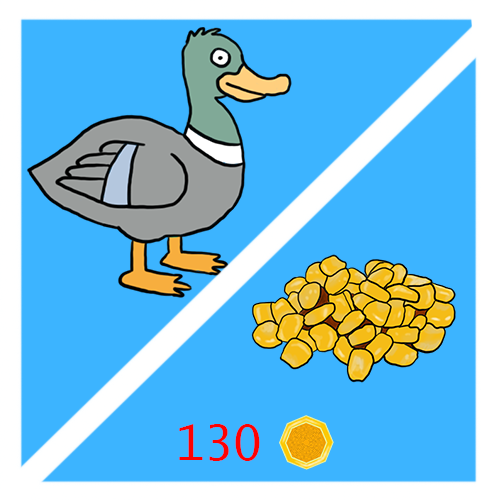
<style>
.page{position:relative;width:500px;height:500px;background:#3cb4ff}
.page>*{position:absolute;margin:0}
.t1{font:48px "LucidaConsole";color:#ff0101}
</style>
<div class="page">
<p class="t1" style="left:179px;top:424px;width:81px;height:37px">130</p>
</div>
